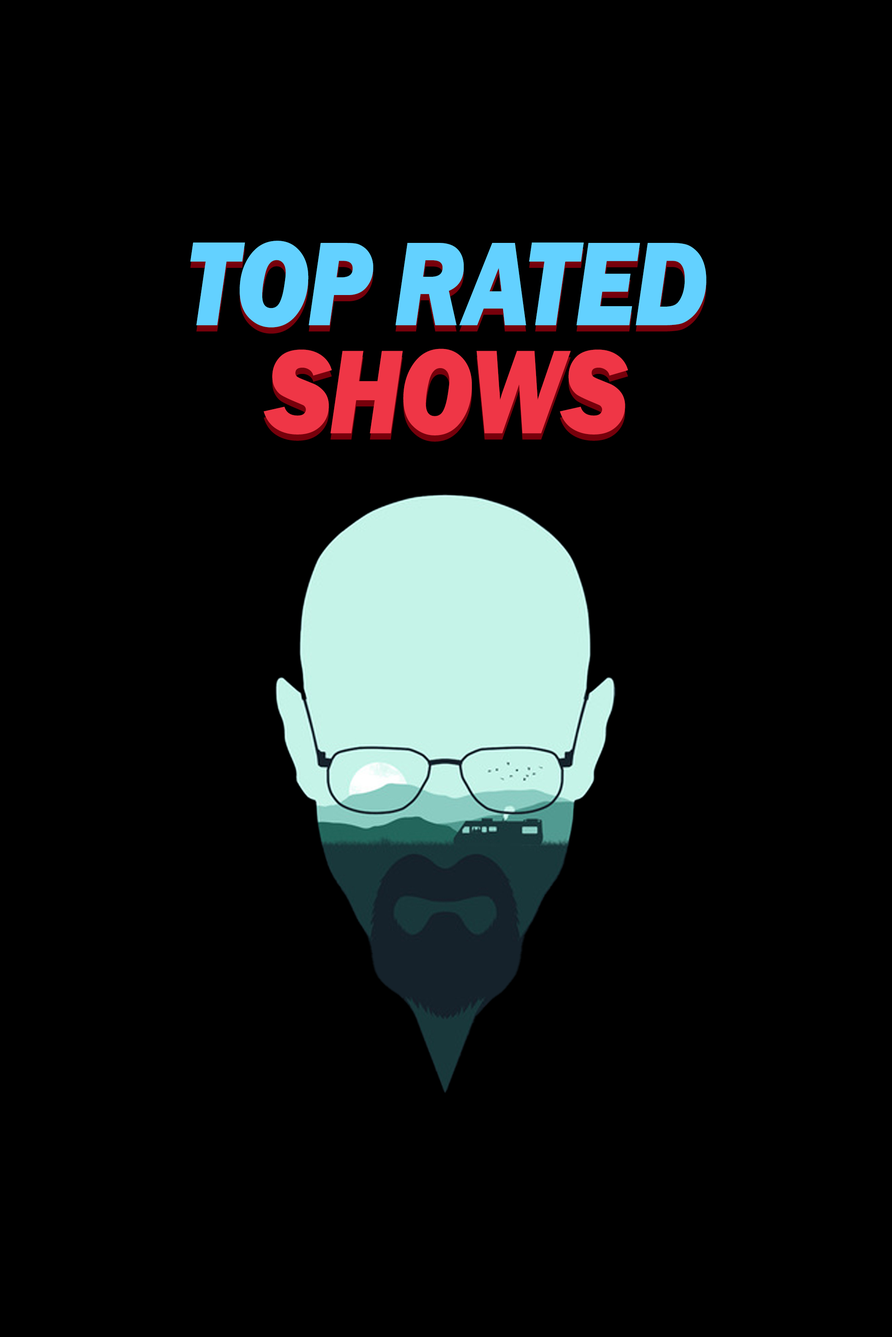
<style>
.page{position:relative;width:892px;height:1337px;background:#000000}
.page>*{position:absolute;margin:0}
.t1{font:123.5px "FranklinGothic-HeavyItalic";letter-spacing:-0.02em;color:#63d1ff;scale:0.87 1}
.t2{font:123.5px "FranklinGothic-HeavyItalic";letter-spacing:-0.02em;color:#ef3646;scale:0.87 1}
</style>
<div class="page">
<p class="t1" style="left:190px;top:241px;width:516px;height:87px">TOP RATED</p>
<p class="t2" style="left:263px;top:349px;width:365px;height:87px">SHOWS</p>
</div>
